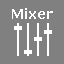
<style>
.page{position:relative;width:64px;height:64px;background:#808080}
.page>*{position:absolute;margin:0}
.t1{font:14px "Verdana-Bold";color:#ffffff}
</style>
<div class="page">
<p class="t1" style="left:12px;top:8px;width:41px;height:11px">Mixer</p>
</div>
